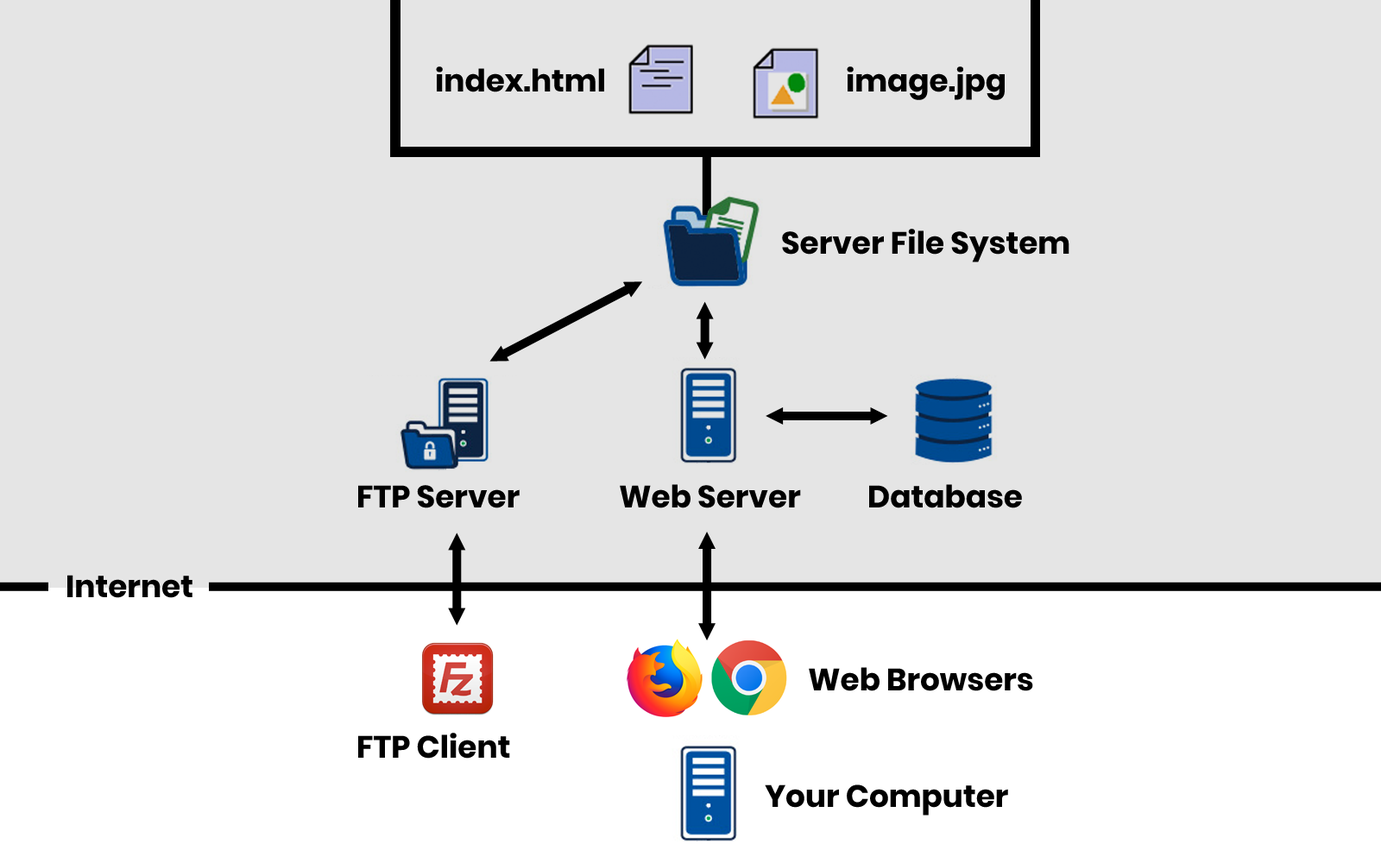
<style>
.page{position:relative;width:1381px;height:863px;background:#e5e5e5}
.page>*{position:absolute;margin:0}
.t1{font:30.9px "Poppins-Bold";color:#000000}
</style>
<div class="page">
<p class="t1" style="left:436px;top:66px;width:168px;height:26px">index.html</p>
<p class="t1" style="left:847px;top:66px;width:158px;height:34px">image.jpg</p>
<p class="t1" style="left:782px;top:229px;width:288px;height:33px">Server File System</p>
<p class="t1" style="left:358px;top:485px;width:162px;height:23px">FTP Server</p>
<p class="t1" style="left:620px;top:484px;width:181px;height:24px">Web Server</p>
<p class="t1" style="left:869px;top:484px;width:153px;height:24px">Database</p>
<p class="t1" style="left:67px;top:575px;width:126px;height:23px">Internet</p>
<p class="t1" style="left:809px;top:667px;width:224px;height:24px">Web Browsers</p>
<p class="t1" style="left:358px;top:733px;width:152px;height:26px">FTP Client</p>
<p class="t1" style="left:765px;top:785px;width:243px;height:31px">Your Computer</p>
</div>
